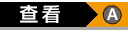
<style>
.page{position:relative;width:128px;height:32px;background:#000000}
.page>*{position:absolute;margin:0}
.t1{font:20px "FZLTHProGlobal-Demibold";letter-spacing:0.125em;color:#ffffff}
</style>
<div class="page">
<p class="t1" style="left:20px;top:5px;width:40px;height:18px">查看</p>
</div>
